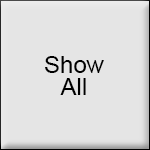
<style>
.page{position:relative;width:150px;height:150px;background:#e5e5e5}
.page>*{position:absolute;margin:0}
.t1{font:24px/22px "ArialMT";color:#000000}
</style>
<div class="page">
<p class="t1" style="left:45px;top:56px;width:59px;height:39px;text-align:center">Show<br>All</p>
</div>
